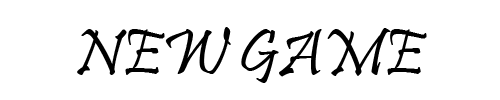
<style>
.page{position:relative;width:500px;height:100px;background:#ffffff}
.page>*{position:absolute;margin:0}
.t1{font:66.7px "Pristina-Regular";color:#000000}
</style>
<div class="page">
<p class="t1" style="left:77px;top:27px;width:350px;height:56px">NEW GAME</p>
</div>
